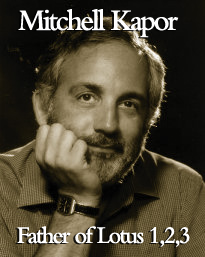
<style>
.page{position:relative;width:205px;height:257px}
.page>*{position:absolute;margin:0}
.t1{font:31.2px "BemboMT-SemiBold";letter-spacing:-0.08em;color:#ffffff;scale:0.95 1}
.t2{font:25px "BemboMT-SemiBold";letter-spacing:-0.08em;color:#ffffff;scale:0.95 1}
</style>
<div class="page">
<p class="t1" style="left:18px;top:9px;width:161px;height:29px">Mitchell Kapor</p>
<p class="t2" style="left:17px;top:226px;width:173px;height:21px">Father of Lotus 1,2,3</p>
</div>
